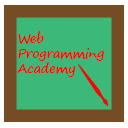
<style>
.page{position:relative;width:128px;height:128px;background:#3cb878}
.page>*{position:absolute;margin:0}
.t1{font:12.5px "SegoePrint-Bold";color:#ff0202}
</style>
<div class="page">
<p class="t1" style="left:17px;top:31px;width:88px;height:46px">Web <br>Programming<br>Academy</p>
</div>
